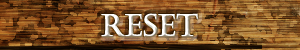
<style>
.page{position:relative;width:300px;height:50px}
.page>*{position:absolute;margin:0}
.t1{font:30px "Castellar";color:#ffffff;font-weight:bold}
</style>
<div class="page">
<p class="t1" style="left:101px;top:13px;width:98px;height:24px">Reset</p>
</div>
